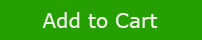
<style>
.page{position:relative;width:202px;height:40px;background:#269f00}
.page>*{position:absolute;margin:0}
.t1{font:20px "MSReferenceSansSerif";color:#edf2e7}
</style>
<div class="page">
<p class="t1" style="left:42px;top:12px;width:116px;height:16px">Add to Cart</p>
</div>
